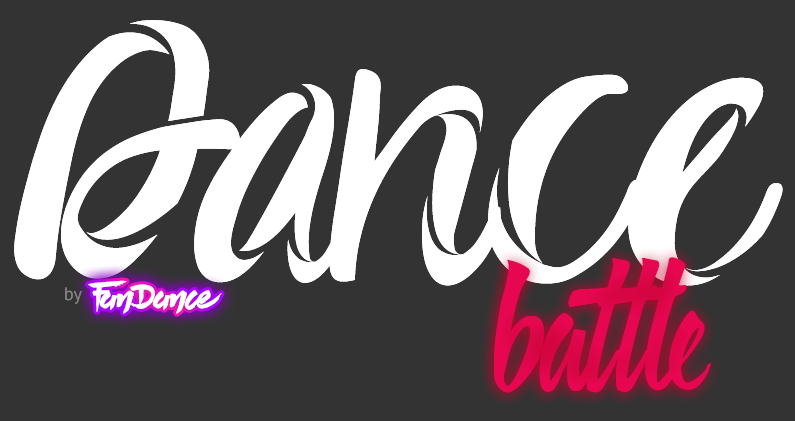
<style>
.page{position:relative;width:795px;height:421px;background:#333333}
.page>*{position:absolute;margin:0}
.t1{font:358px "Swape";color:#ffffff}
.t2{font:158px "Handletter";color:#e4074e}
.t3{font:31.9px "LastParadise";letter-spacing:-0.02em;color:#ffffff}
.t4{font:31.9px "LastParadise";letter-spacing:-0.2em;color:#ffffff}
.t5{font:31.9px "LastParadise";color:#ffffff}
.t6{font:31.9px "LastParadise";letter-spacing:-0.04em;color:#ffffff}
.t7{font:18px "PTSans-Regular";color:#818181}
</style>
<div class="page">
<p class="t1" style="left:14px;top:20px;width:769px;height:266px">Dance</p>
<p class="t2" style="left:494px;top:257px;width:217px;height:136px;rotate:-1deg">battle</p>
<p class="t3" style="left:88px;top:280px;width:134px;height:34px"><span class="t4">F</span>a<span class="t5">n </span><span class="t6">D</span>anc<span class="t5">e</span></p>
<p class="t7" style="left:65px;top:287px;width:17px;height:17px">by</p>
</div>
